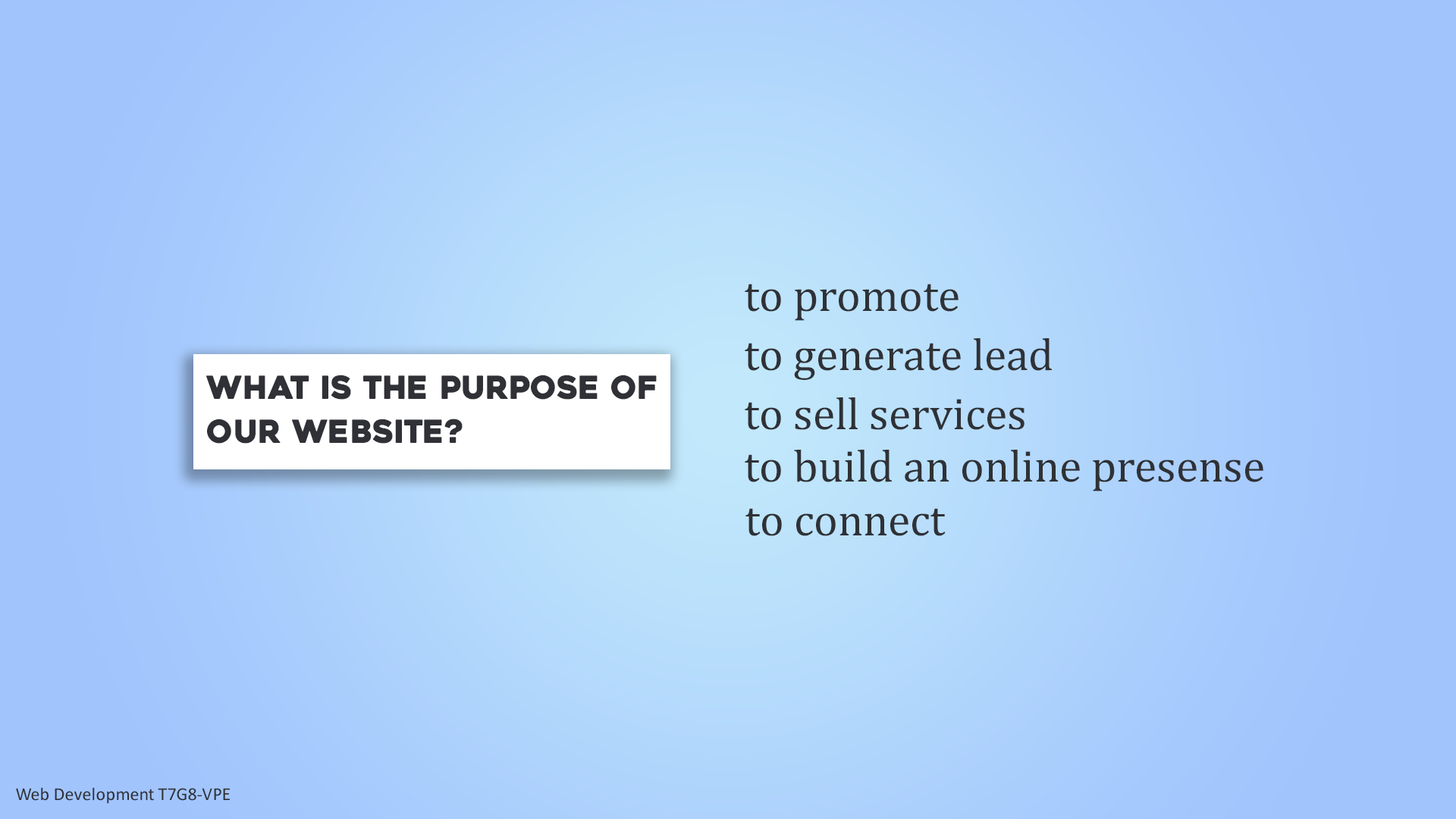
<style>
.page{position:relative;width:1456px;height:819px}
.page>*{position:absolute;margin:0}
.t1{font:45.5px "CambriaMath";color:#2f3136}
.t2{font:31.9px/14.7px "Heavitas";color:#2f3136}
.t3{font:18.2px "Calibri";color:#2f3136}
</style>
<div class="page">
<p class="t1" style="left:745px;top:284px;width:214px;height:37px">to promote</p>
<p class="t1" style="left:745px;top:338px;width:307px;height:42px">to generate lead</p>
<p class="t2" style="left:206px;top:375px;width:451px;height:69px">What is the purpose of<br><br><br>our website?</p>
<p class="t1" style="left:745px;top:397px;width:279px;height:33px">to sell services</p>
<p class="t1" style="left:745px;top:450px;width:518px;height:41px">to build an online presense</p>
<p class="t1" style="left:745px;top:508px;width:201px;height:28px">to connect</p>
<p class="t3" style="left:16px;top:787px;width:214px;height:17px">Web Development T7G8-VPE</p>
</div>
